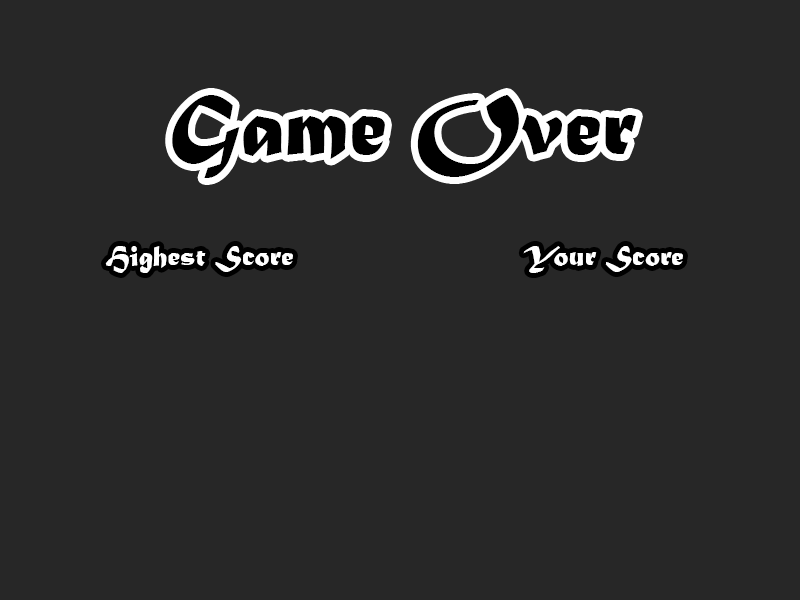
<style>
.page{position:relative;width:800px;height:600px;background:#272727}
.page>*{position:absolute;margin:0}
.t1{font:90px "MaturaMTScriptCapitals";color:#000000}
.t2{font:30px "MaturaMTScriptCapitals";color:#ffffff}
</style>
<div class="page">
<p class="t1" style="left:172px;top:95px;width:464px;height:83px">Game Over</p>
<p class="t2" style="left:105px;top:246px;width:188px;height:27px">Highest Score</p>
<p class="t2" style="left:523px;top:246px;width:160px;height:27px">Your Score</p>
</div>
